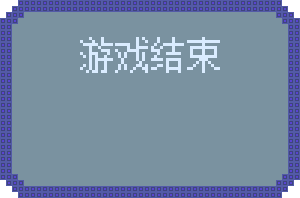
<style>
.page{position:relative;width:300px;height:198px;background:#7a92a0}
.page>*{position:absolute;margin:0}
.t1{font:36px "FZXS12--GB1-0";color:#daecff}
</style>
<div class="page">
<p class="t1" style="left:80px;top:37px;width:140px;height:36px">游戏结束</p>
</div>
